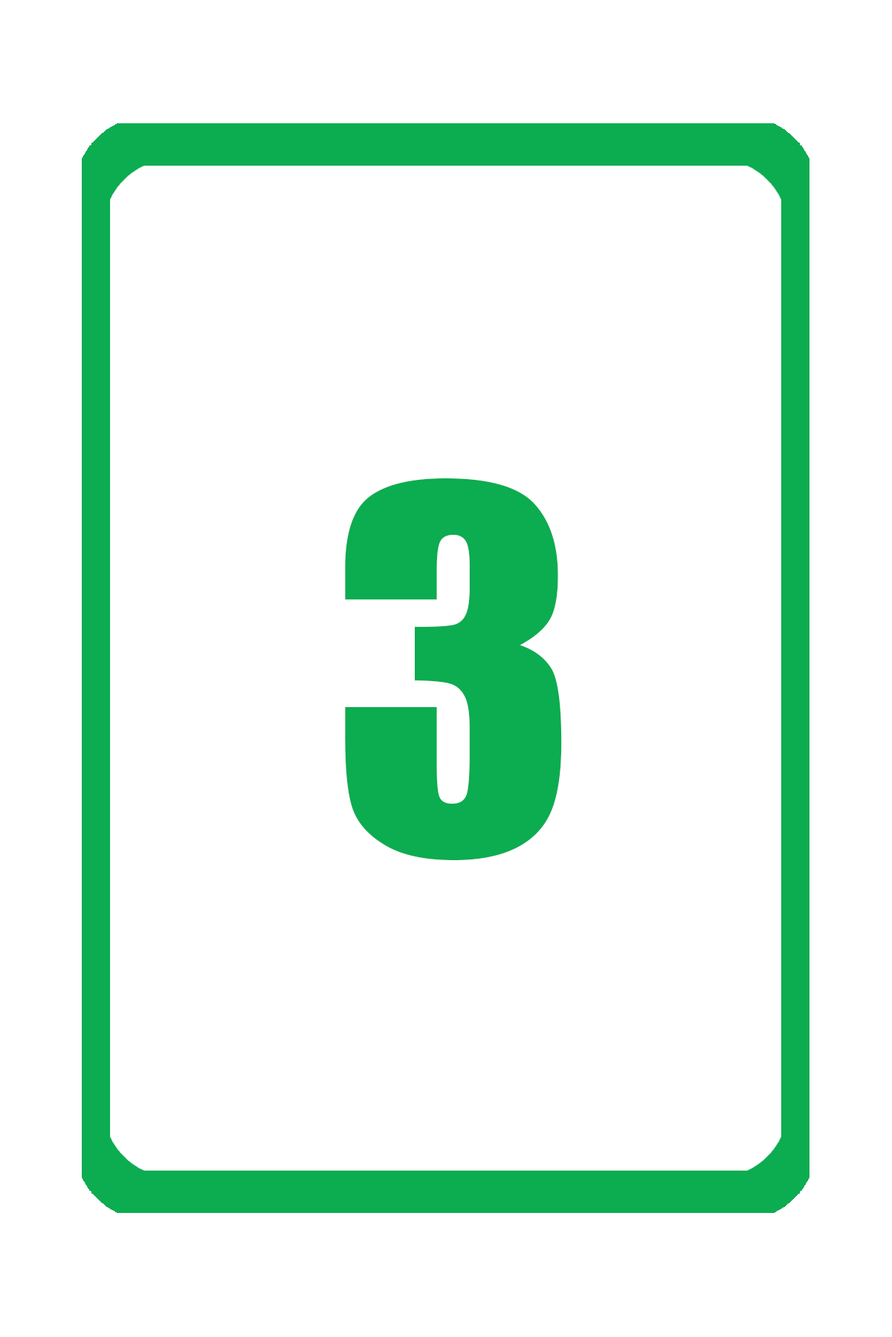
<style>
.page{position:relative;width:892px;height:1337px;background:#ffffff}
.page>*{position:absolute;margin:0}
.t1{font:464.4px "Impact";color:#0cac50}
</style>
<div class="page">
<p class="t1" style="left:345px;top:478px;width:217px;height:382px">3</p>
</div>
